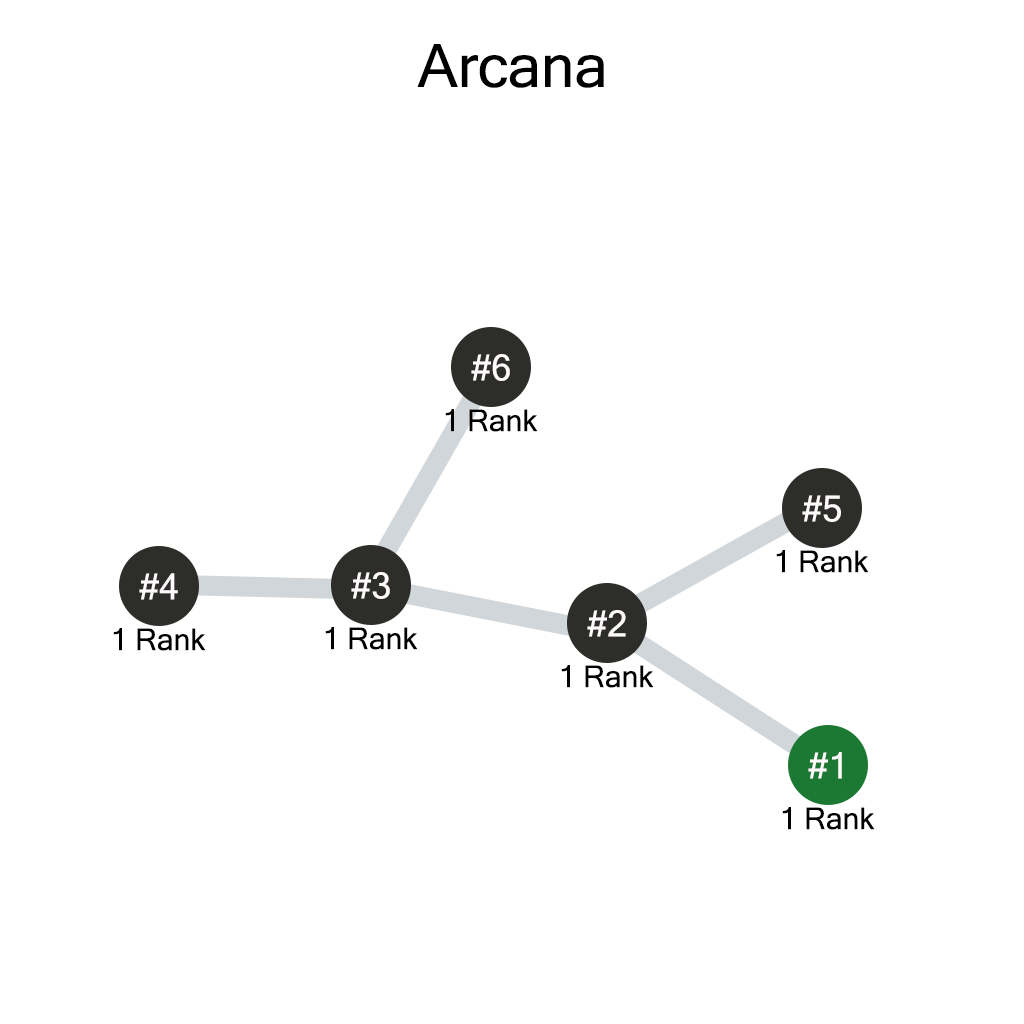
<style>
.page{position:relative;width:1024px;height:1024px;background:#ffffff}
.page>*{position:absolute;margin:0}
.t1{font:60px "MicrosoftSansSerif";color:#000000}
.t2{font:36px "MicrosoftSansSerif";color:#fefafc}
.t3{font:30px "MicrosoftSansSerif";color:#000000}
</style>
<div class="page">
<p class="t1" style="left:417px;top:44px;width:187px;height:44px">Arcana</p>
<p class="t2" style="left:471px;top:354px;width:39px;height:27px">#6</p>
<p class="t3" style="left:445px;top:409px;width:93px;height:23px">1 Rank</p>
<p class="t2" style="left:802px;top:495px;width:39px;height:27px">#5</p>
<p class="t3" style="left:776px;top:550px;width:93px;height:23px">1 Rank</p>
<p class="t2" style="left:139px;top:573px;width:39px;height:27px">#4</p>
<p class="t2" style="left:351px;top:572px;width:39px;height:27px">#3</p>
<p class="t2" style="left:587px;top:610px;width:39px;height:27px">#2</p>
<p class="t3" style="left:113px;top:628px;width:93px;height:23px">1 Rank</p>
<p class="t3" style="left:325px;top:627px;width:93px;height:23px">1 Rank</p>
<p class="t3" style="left:561px;top:665px;width:93px;height:23px">1 Rank</p>
<p class="t2" style="left:808px;top:752px;width:34px;height:27px">#1</p>
<p class="t3" style="left:782px;top:807px;width:93px;height:23px">1 Rank</p>
</div>
